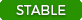
<style>
.page{position:relative;width:82px;height:20px;background:#299200}
.page>*{position:absolute;margin:0}
.t1{font:13.1px "Montserrat-Light";letter-spacing:0.02em;color:#ffffff}
</style>
<div class="page">
<p class="t1" style="left:16px;top:5px;width:50px;height:10px">STABLE</p>
</div>
